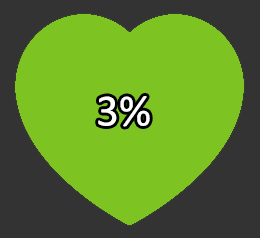
<style>
.page{position:relative;width:260px;height:238px;background:#7dc322}
.page>*{position:absolute;margin:0}
.t1{font:45px "Calibri";color:#ffffff}
</style>
<div class="page">
<p class="t1" style="left:98px;top:96px;width:52px;height:31px">3%</p>
</div>
